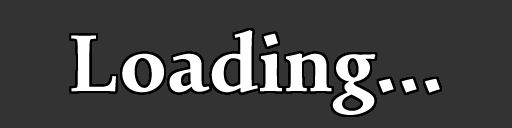
<style>
.page{position:relative;width:512px;height:128px;background:#333333}
.page>*{position:absolute;margin:0}
.t1{font:85px "Pescadero-Bold";color:#ffffff}
</style>
<div class="page">
<p class="t1" style="left:71px;top:30px;width:369px;height:85px">Loading...</p>
</div>
